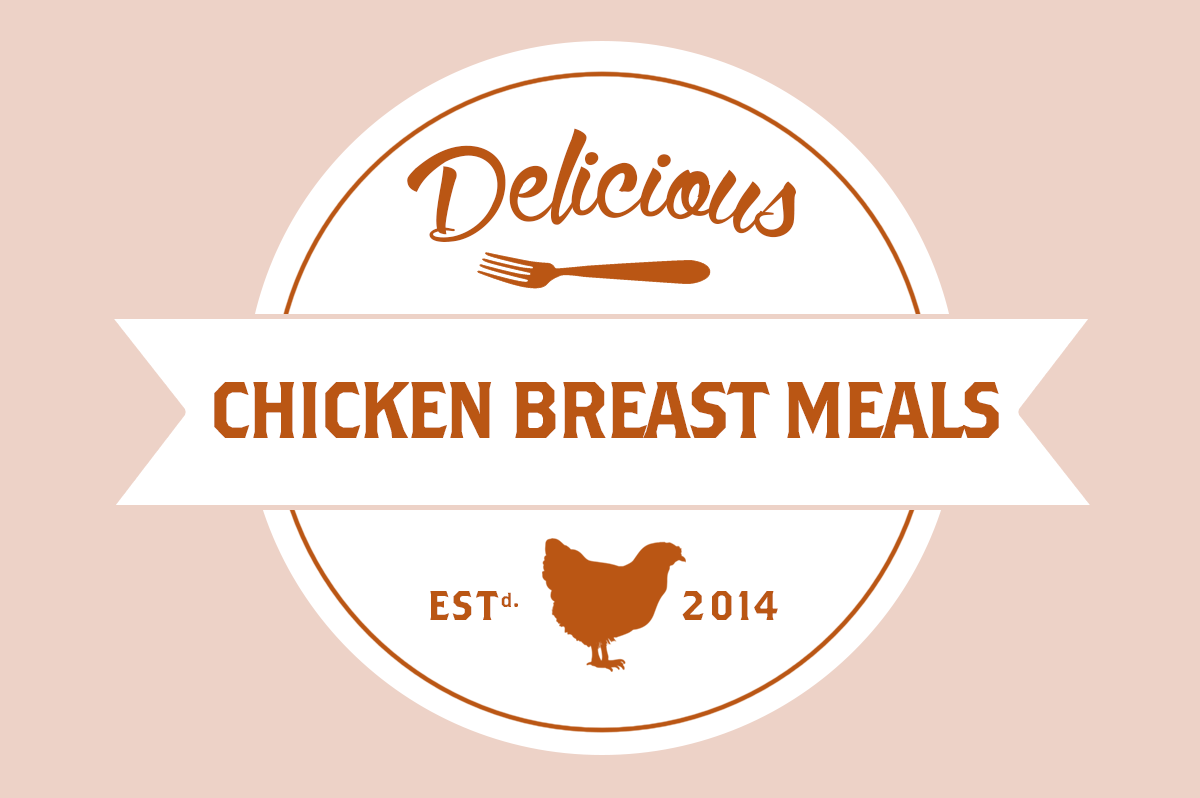
<style>
.page{position:relative;width:1200px;height:798px;background:#edd2c7}
.page>*{position:absolute;margin:0}
.t1{font:188.2px "WolfintheCity";letter-spacing:0.01em;color:#ba5614;scale:0.95 1}
.t2{font:80px "Brothers";letter-spacing:-0.05em;color:#ba5614;text-transform:uppercase;scale:0.97 1}
.t3{font:41.3px "Brothers";letter-spacing:0.05em;color:#ba5614}
.t4{font:19.9px "Brothers";letter-spacing:0.05em;color:#ba5614}
</style>
<div class="page">
<p class="t1" style="left:407px;top:128px;width:389px;height:114px">Delicious</p>
<p class="t2" style="left:214px;top:382px;width:785px;height:56px">Chicken Breast Meals</p>
<p class="t3" style="left:430px;top:591px;width:88px;height:29px">EST<span class="t4">d.</span></p>
<p class="t3" style="left:682px;top:591px;width:96px;height:29px">2014</p>
</div>
